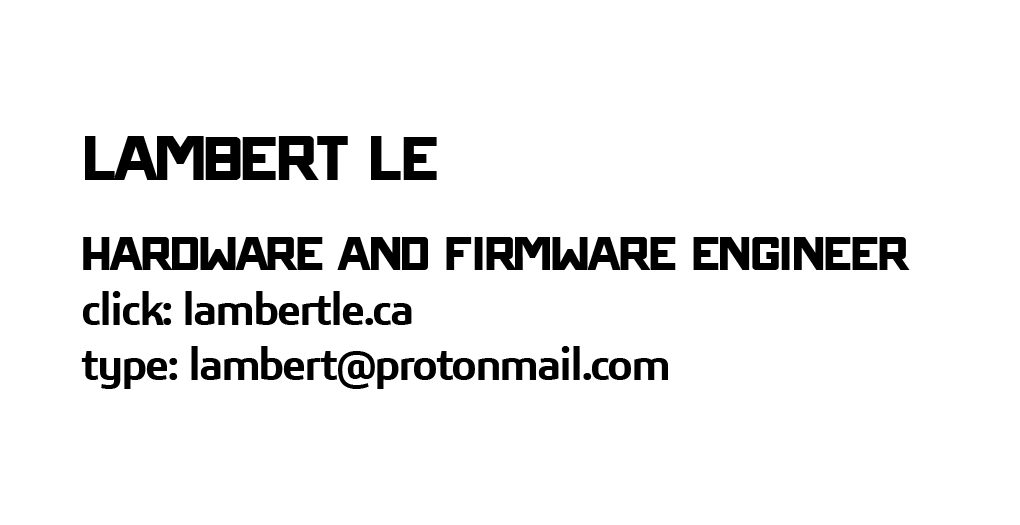
<style>
.page{position:relative;width:1020px;height:525px;background:#ffffff}
.page>*{position:absolute;margin:0}
.t1{font:45.8px "3ds-SemiBold";letter-spacing:-0.048em;color:#000000}
.t2{font:100px "ONRAMP";letter-spacing:-0.048em;color:#000000}
.t3{font:75px "ONRAMP";letter-spacing:-0.048em;color:#000000}
</style>
<div class="page">
<p class="t1" style="left:81px;top:136px;width:829px;height:253px"><span class="t2">LAMBERT LE<br></span><span class="t3">HARDWARE AND FIRMWARE ENGINEER<br></span>click: lambertle.ca<br>type: lambert@protonmail.com</p>
</div>
